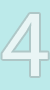
<style>
.page{position:relative;width:50px;height:90px;background:#bceaea}
.page>*{position:absolute;margin:0}
.t1{font:96px "MyriadPro-Regular";color:#fafafa}
</style>
<div class="page">
<p class="t1" style="left:2px;top:14px;width:46px;height:62px;opacity:0.7">4</p>
</div>
